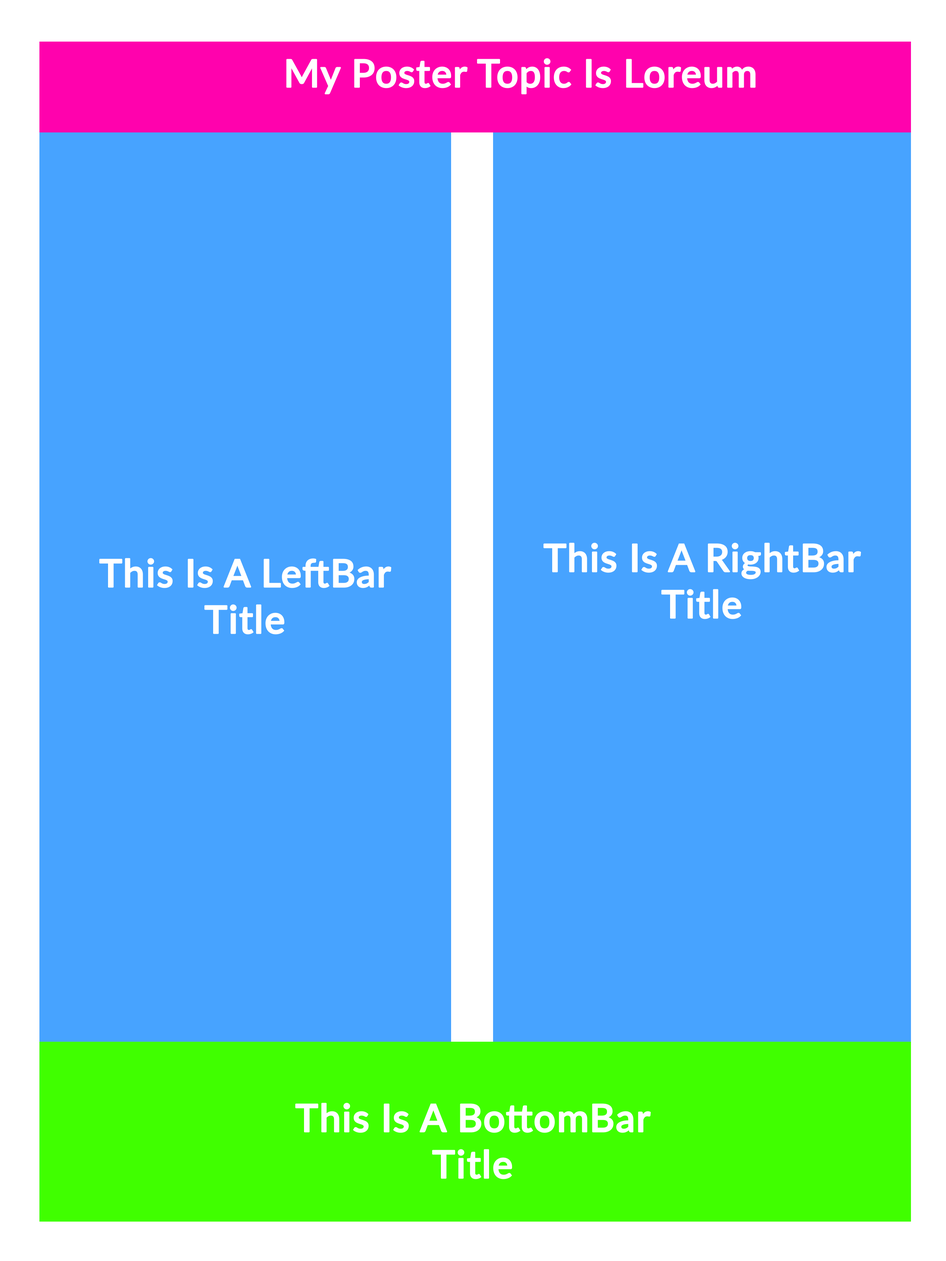
<style>
.page{position:relative;width:946px;height:1261px;background:#47a3ff}
.page>*{position:absolute;margin:0}
.t1{font:38.7px "Lato-Semibold";color:#ffffff;font-weight:bold}
</style>
<div class="page">
<p class="t1" style="left:286px;top:58px;width:470px;height:36px">My Poster Topic Is Loreum</p>
<p class="t1" style="left:543px;top:543px;width:318px;height:76px;text-align:center">This Is A RightBar <br>Title</p>
<p class="t1" style="left:99px;top:558px;width:292px;height:76px;text-align:center">This Is A LeftBar <br>Title</p>
<p class="t1" style="left:295px;top:1103px;width:356px;height:76px;text-align:center">This Is A BottomBar <br>Title</p>
</div>
